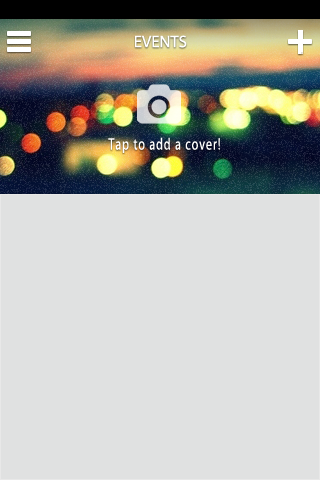
<style>
.page{position:relative;width:320px;height:480px;background:#e0e1e1}
.page>*{position:absolute;margin:0}
.t1{font:16.7px "MyriadPro-Regular";color:#ffffff;text-transform:uppercase}
.t2{font:16.5px "MyriadPro-Regular";letter-spacing:0.08em;color:#ffffff;scale:0.73 1}
</style>
<div class="page">
<p class="t1" style="left:135px;top:35px;width:52px;height:13px">Events</p>
<p class="t2" style="left:108px;top:137px;width:112px;height:16px">Tap to add a cover!</p>
</div>
